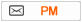
<style>
.page{position:relative;width:82px;height:22px;background:#fdfdfd}
.page>*{position:absolute;margin:0}
.t1{font:12px "ArialMT";letter-spacing:-0.01em;color:#ff5f00;font-weight:bold}
</style>
<div class="page">
<p class="t1" style="left:41px;top:6px;width:17px;height:10px">PM</p>
</div>
